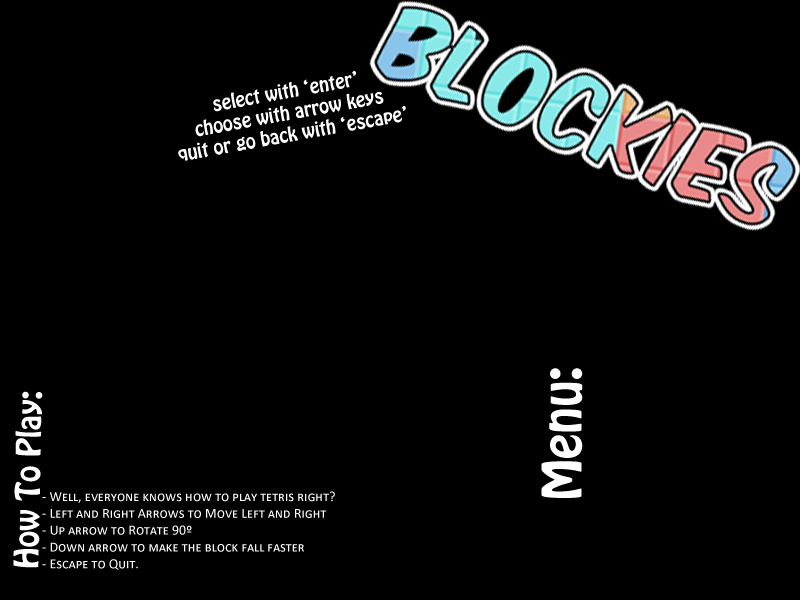
<style>
.page{position:relative;width:800px;height:600px;background:#000000}
.page>*{position:absolute;margin:0}
.t1{font:18px "HoboStd";color:#ffffff}
.t2{font:48px "HoboStd";color:#ffffff}
.t3{font:30px "HoboStd";color:#ffffff}
.t4{font:14px "Calibri";color:#ffffff;font-variant:small-caps}
</style>
<div class="page">
<p class="t1" style="left:178px;top:70px;width:228px;height:91px;text-align:center;rotate:-10deg">select with ‘enter’<br>choose with arrow keys<br>quit or go back with ‘escape’</p>
<p class="t2" style="left:541px;top:368px;width:42px;height:130px;rotate:-90deg">Menu:</p>
<p class="t3" style="left:13px;top:391px;width:30px;height:177px;rotate:-89deg">How To Play:</p>
<p class="t4" style="left:42px;top:491px;width:293px;height:79px">- Well, everyone knows how to play tetris right?<br>- Left and Right Arrows to Move Left and Right<br>- Up arrow to Rotate 90º<br>- Down arrow to make the block fall faster<br>- Escape to Quit.</p>
</div>
